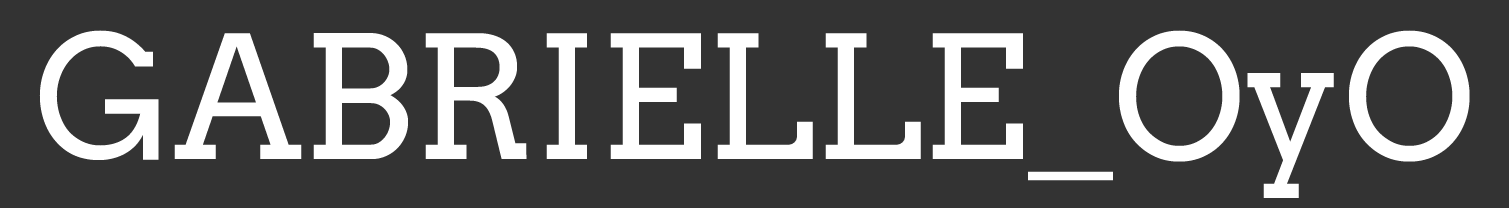
<style>
.page{position:relative;width:1509px;height:208px;background:#333333}
.page>*{position:absolute;margin:0}
.t1{font:170px "Arvo";color:#ffffff}
</style>
<div class="page">
<p class="t1" style="left:39px;top:30px;width:1431px;height:168px">GABRIELLE_OyO</p>
</div>
